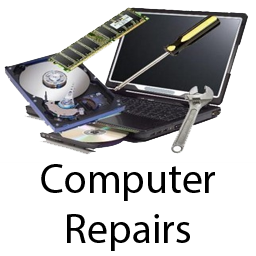
<style>
.page{position:relative;width:256px;height:256px;background:#ffffff}
.page>*{position:absolute;margin:0}
.t1{font:41.7px "MyriadPro-Regular";color:#000000}
</style>
<div class="page">
<p class="t1" style="left:41px;top:164px;width:174px;height:87px;text-align:center">Computer<br>Repairs</p>
</div>
